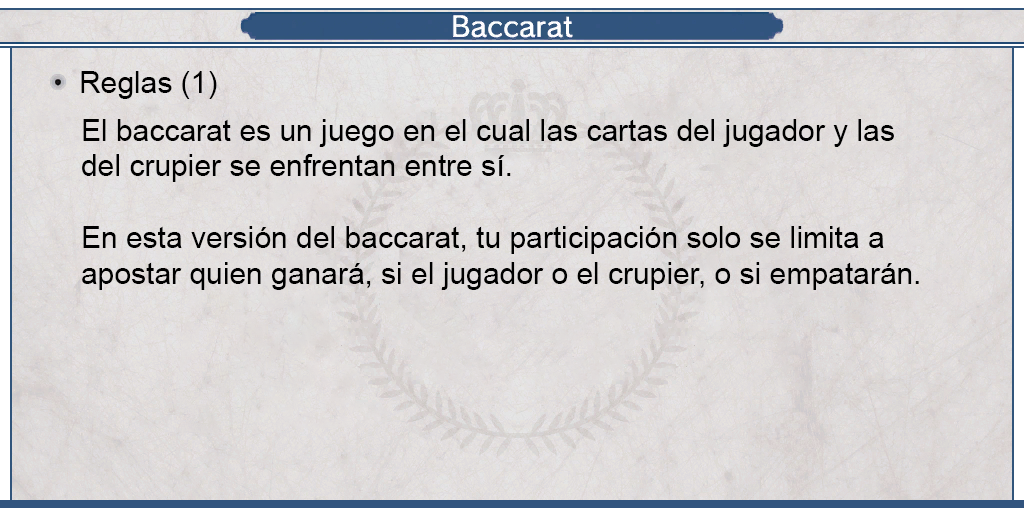
<style>
.page{position:relative;width:1024px;height:512px}
.page>*{position:absolute;margin:0}
.t1{font:29.9px "ArialMT";color:#000000}
</style>
<div class="page">
<p class="t1" style="left:81px;top:71px;width:136px;height:28px">Reglas (1)</p>
<p class="t1" style="left:82px;top:119px;width:837px;height:171px;text-align:justify">El baccarat es un juego en el cual las cartas del jugador y las <br>del crupier se enfrentan entre sí.<br><br>En esta versión del baccarat, tu participación solo se limita a <br>apostar quien ganará, si el jugador o el crupier, o si empatarán.</p>
</div>
